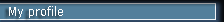
<style>
.page{position:relative;width:224px;height:22px;background:#527f9b}
.page>*{position:absolute;margin:0}
.t1{font:12.1px "Verdana";color:#ffffff;scale:0.91 1}
</style>
<div class="page">
<p class="t1" style="left:9px;top:6px;width:54px;height:12px">My profile</p>
</div>
